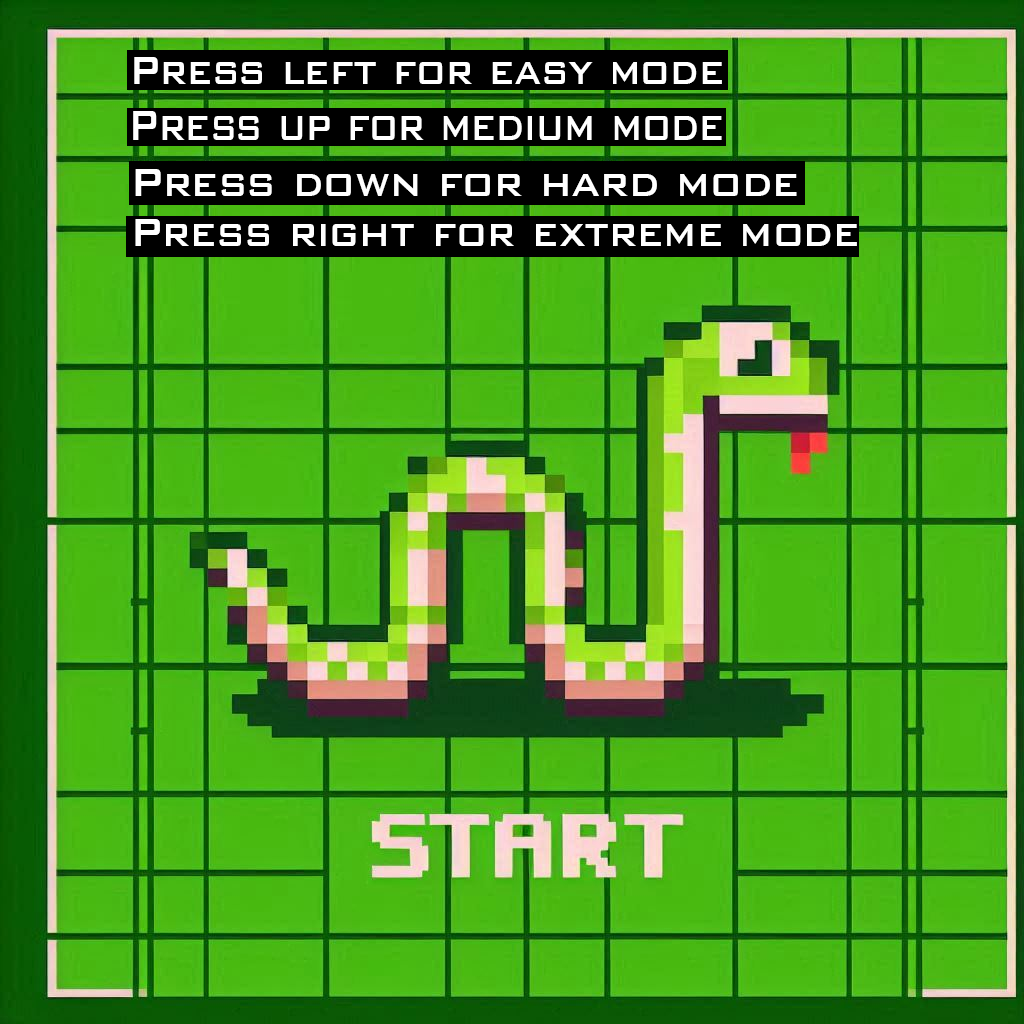
<style>
.page{position:relative;width:1024px;height:1024px}
.page>*{position:absolute;margin:0}
.t1{font:53px "BankGothicBT-Medium";color:#ffffff;scale:0.78 1}
.t2{font:56.2px "BankGothicBT-Medium";color:#ffffff;scale:0.72 1}
.t3{font:52.5px "BankGothicBT-Medium";color:#ffffff;scale:0.84 1}
.t4{font:51.4px "BankGothicBT-Medium";color:#ffffff;scale:0.84 1}
</style>
<div class="page">
<p class="t1" style="left:134px;top:57px;width:588px;height:27px">Press left for easy mode</p>
<p class="t2" style="left:133px;top:111px;width:589px;height:29px">Press up for medium mode</p>
<p class="t3" style="left:135px;top:169px;width:662px;height:27px">Press down for hard mode</p>
<p class="t4" style="left:135px;top:219px;width:722px;height:27px">Press right for extreme mode</p>
</div>
